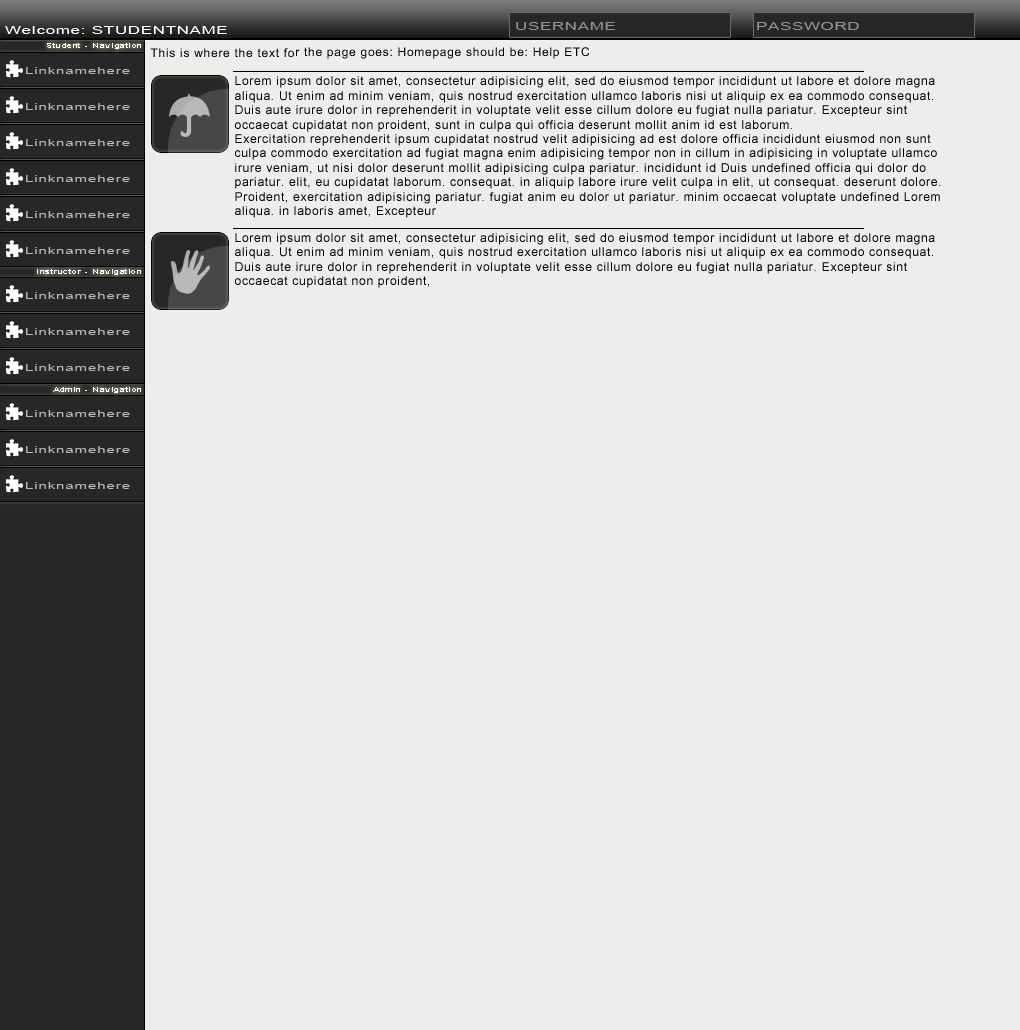
<style>
.page{position:relative;width:1020px;height:1030px;background:#ededeb}
.page>*{position:absolute;margin:0}
.t1{font:11px "ArialMT";letter-spacing:0.06em;color:#ffffff;scale:1.5 1}
.t2{font:11px "ArialMT";letter-spacing:0.06em;color:#939393;scale:1.5 1}
.t3{font:6px "ArialMT";letter-spacing:0.06em;color:#ffffff;scale:1.5 1}
.t4{font:12px "ArialMT";letter-spacing:0.06em;color:#000000}
.t5{font:10px "ArialMT";letter-spacing:0.06em;color:#b8b8b8;scale:1.5 1}
</style>
<div class="page">
<p class="t1" style="left:5px;top:26px;width:222px;height:8px">Welcome: STUDENTNAME</p>
<p class="t2" style="left:516px;top:22px;width:100px;height:8px">USERNAME</p>
<p class="t2" style="left:757px;top:22px;width:102px;height:8px">PASSWORD</p>
<p class="t3" style="left:47px;top:43px;width:94px;height:6px">Student - Navigation</p>
<p class="t4" style="left:150px;top:47px;width:440px;height:12px">This is where the text for the page goes: Homepage should be: Help ETC</p>
<p class="t5" style="left:26px;top:67px;width:104px;height:7px">Linknamehere</p>
<p class="t4" style="left:235px;top:76px;width:706px;height:142px">Lorem ipsum dolor sit amet, consectetur adipisicing elit, sed do eiusmod tempor incididunt ut labore et dolore magna aliqua. Ut enim ad minim veniam, quis nostrud exercitation ullamco laboris nisi ut aliquip ex ea commodo consequat. Duis aute irure dolor in reprehenderit in voluptate velit esse cillum dolore eu fugiat nulla pariatur. Excepteur sint occaecat cupidatat non proident, sunt in culpa qui officia deserunt mollit anim id est laborum.<br>Exercitation reprehenderit ipsum cupidatat nostrud velit adipisicing ad est dolore officia incididunt eiusmod non sunt culpa commodo exercitation ad fugiat magna enim adipisicing tempor non in cillum in adipisicing in voluptate ullamco irure veniam, ut nisi dolor deserunt mollit adipisicing culpa pariatur. incididunt id Duis undefined officia qui dolor do pariatur. elit, eu cupidatat laborum. consequat. in aliquip labore irure velit culpa in elit, ut consequat. deserunt dolore.<br>Proident, exercitation adipisicing pariatur. fugiat anim eu dolor ut pariatur. minim occaecat voluptate undefined Lorem aliqua. in laboris amet, Excepteur</p>
<p class="t5" style="left:26px;top:103px;width:104px;height:7px">Linknamehere</p>
<p class="t5" style="left:26px;top:139px;width:104px;height:7px">Linknamehere</p>
<p class="t5" style="left:26px;top:175px;width:104px;height:7px">Linknamehere</p>
<p class="t5" style="left:26px;top:211px;width:104px;height:7px">Linknamehere</p>
<p class="t4" style="left:235px;top:233px;width:700px;height:55px">Lorem ipsum dolor sit amet, consectetur adipisicing elit, sed do eiusmod tempor incididunt ut labore et dolore magna aliqua. Ut enim ad minim veniam, quis nostrud exercitation ullamco laboris nisi ut aliquip ex ea commodo consequat. Duis aute irure dolor in reprehenderit in voluptate velit esse cillum dolore eu fugiat nulla pariatur. Excepteur sint occaecat cupidatat non proident,</p>
<p class="t5" style="left:26px;top:247px;width:104px;height:7px">Linknamehere</p>
<p class="t3" style="left:37px;top:269px;width:104px;height:6px">Instructor - Navigation</p>
<p class="t5" style="left:26px;top:292px;width:104px;height:7px">Linknamehere</p>
<p class="t5" style="left:26px;top:328px;width:104px;height:7px">Linknamehere</p>
<p class="t5" style="left:26px;top:364px;width:104px;height:7px">Linknamehere</p>
<p class="t3" style="left:53px;top:387px;width:88px;height:6px">Admin - Navigation</p>
<p class="t5" style="left:26px;top:410px;width:104px;height:7px">Linknamehere</p>
<p class="t5" style="left:26px;top:446px;width:104px;height:7px">Linknamehere</p>
<p class="t5" style="left:26px;top:482px;width:104px;height:7px">Linknamehere</p>
</div>
